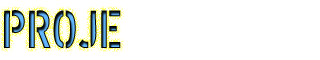
<style>
.page{position:relative;width:320px;height:60px;background:#ffffff}
.page>*{position:absolute;margin:0}
.t1{font:52.7px "XXIISTRAIGHT-ARMY"}
</style>
<div class="page">
<p class="t1" style="left:4px;top:10px;width:117px;height:39px">PROJE</p>
</div>
